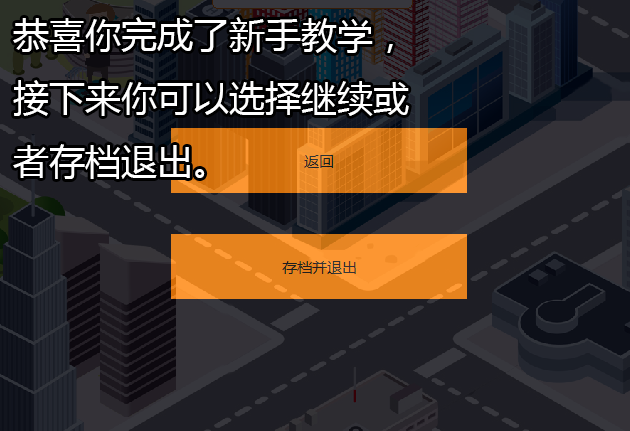
<style>
.page{position:relative;width:630px;height:431px}
.page>*{position:absolute;margin:0}
.t1{font:36px "MicrosoftYaHei";color:#ffffff}
</style>
<div class="page">
<p class="t1" style="left:13px;top:17px;width:396px;height:162px">恭喜你完成了新手教学，接下来你可以选择继续或者存档退出。</p>
</div>
